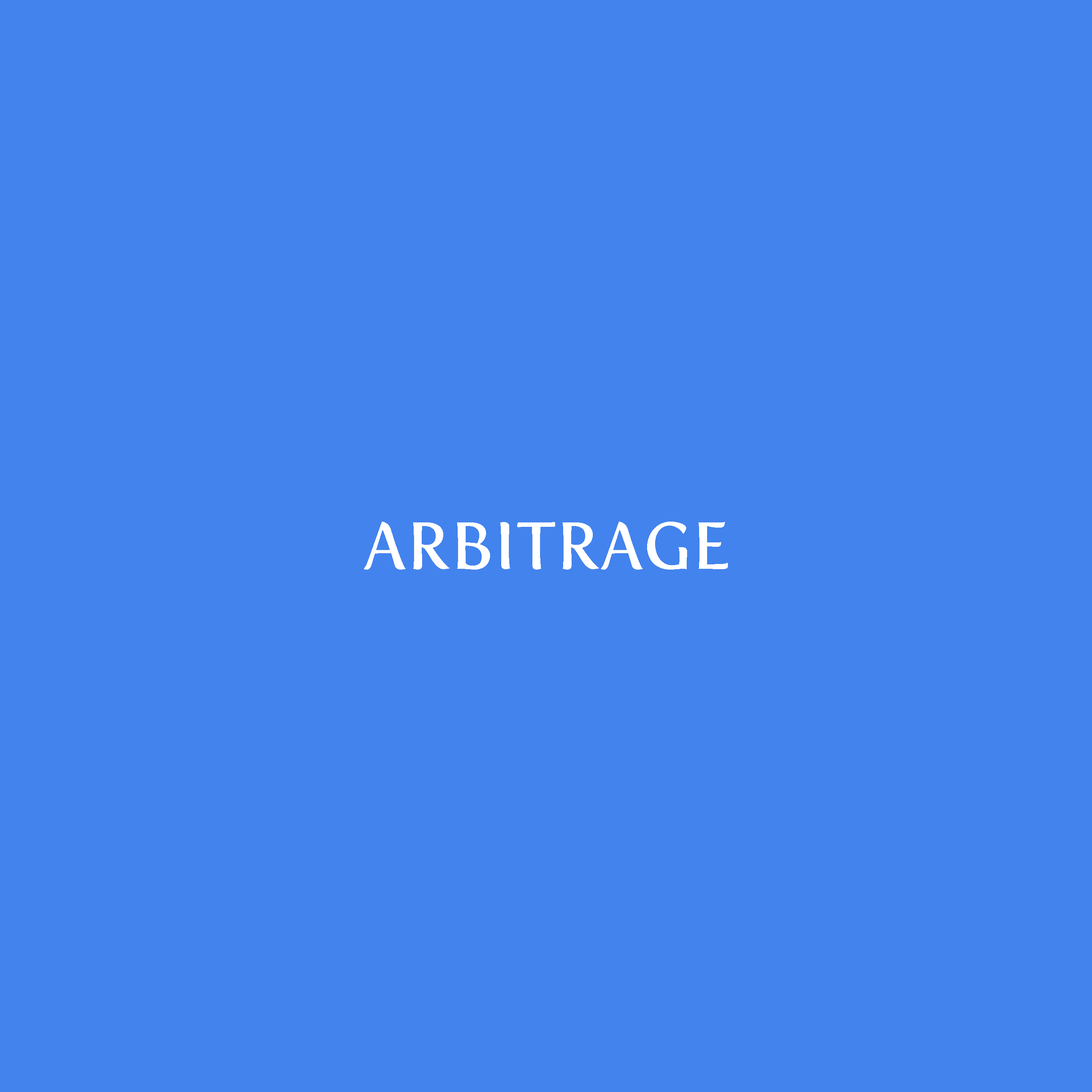
<style>
.page{position:relative;width:1092px;height:1092px;background:#4383ed}
.page>*{position:absolute;margin:0}
.t1{font:65.8px "FertigoPro-Regular";letter-spacing:0.01em;color:#ffffff;text-transform:uppercase}
</style>
<div class="page">
<p class="t1" style="left:364px;top:522px;width:364px;height:48px">Arbitrage</p>
</div>
